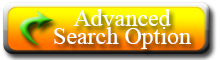
<style>
.page{position:relative;width:220px;height:60px}
.page>*{position:absolute;margin:0}
.t1{font:24px/18px "TimesNewRomanPSMT";color:#ffffff}
</style>
<div class="page">
<p class="t1" style="left:54px;top:9px;width:137px;height:40px;text-align:center">Advanced<br>Search Option</p>
</div>
